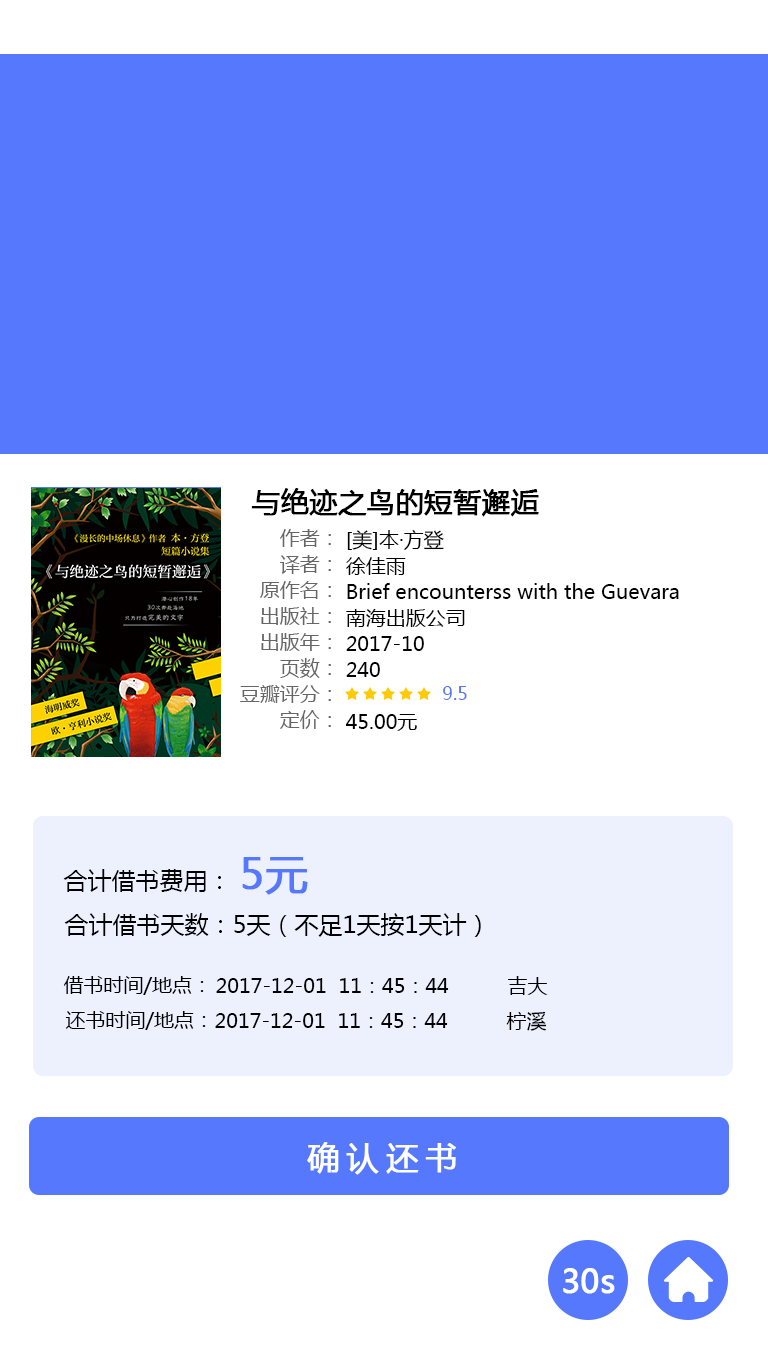
<style>
.page{position:relative;width:768px;height:1360px;background:#ffffff}
.page>*{position:absolute;margin:0}
.t1{font:28px "MicrosoftYaHei";color:#000000;font-weight:bold}
.t2{font:20px/26px "MicrosoftYaHei";color:#666666}
.t3{font:20px/26px "MicrosoftYaHei";color:#000000}
.t4{font:18px "MicrosoftYaHei";color:#5578fc}
.t5{font:42px "MicrosoftYaHei";color:#5578fc;font-weight:bold}
.t6{font:24px "MicrosoftYaHei";color:#000000}
.t7{font:20px "MicrosoftYaHei";color:#000000}
.t8{font:32px "MicrosoftYaHei";letter-spacing:0.2em;color:#ffffff;font-weight:bold}
.t9{font:32px "MicrosoftYaHei";color:#ffffff;font-weight:bold}
</style>
<div class="page">
<p class="t1" style="left:251px;top:488px;width:288px;height:29px">与绝迹之鸟的短暂邂逅</p>
<p class="t2" style="left:240px;top:529px;width:91px;height:200px;text-align:right">作者：<br>译者：<br>原作名：<br>出版社：<br>出版年：<br>页数：<br>豆瓣评分：<br>定价：</p>
<p class="t3" style="left:345px;top:530px;width:334px;height:201px">[美]本·方登<br>徐佳雨<br>Brief encounterss with the Guevara <br>南海出版公司<br>2017-10<br>240<br><br>45.00元</p>
<p class="t4" style="left:443px;top:686px;width:24px;height:14px">9.5</p>
<p class="t5" style="left:242px;top:857px;width:66px;height:38px">5元</p>
<p class="t6" style="left:63px;top:869px;width:158px;height:23px">合计借书费用：</p>
<p class="t6" style="left:64px;top:913px;width:417px;height:24px">合计借书天数：5天（不足1天按1天计）</p>
<p class="t7" style="left:63px;top:976px;width:141px;height:19px">借书时间/地点：</p>
<p class="t7" style="left:508px;top:976px;width:40px;height:19px">吉大</p>
<p class="t7" style="left:216px;top:978px;width:233px;height:15px">2017-12-01  11：45：44</p>
<p class="t7" style="left:65px;top:1011px;width:141px;height:19px">还书时间/地点：</p>
<p class="t7" style="left:215px;top:1013px;width:233px;height:15px">2017-12-01  11：45：44</p>
<p class="t7" style="left:506px;top:1011px;width:41px;height:20px">柠溪</p>
<p class="t8" style="left:307px;top:1142px;width:149px;height:33px">确认还书</p>
<p class="t9" style="left:563px;top:1268px;width:52px;height:26px">30s</p>
</div>
